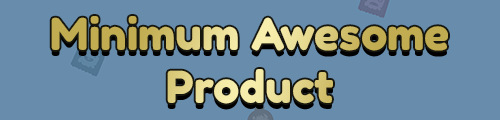
<style>
.page{position:relative;width:500px;height:120px;background:#678cac}
.page>*{position:absolute;margin:0}
.t1{font:44px "FredokaOne-Regular"}
</style>
<div class="page">
<p class="t1" style="left:51px;top:16px;width:397px;height:88px;text-align:center">Minimum Awesome<br>Product</p>
</div>
